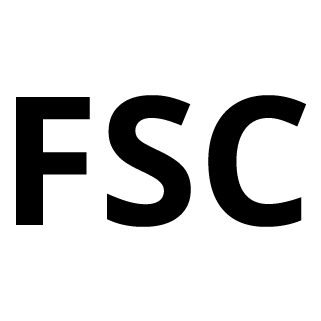
<style>
.page{position:relative;width:321px;height:321px;background:#ffffff}
.page>*{position:absolute;margin:0}
.t1{font:179.3px "NotoSans-Bold";color:#000000}
</style>
<div class="page">
<p class="t1" style="left:16px;top:95px;width:290px;height:132px">FSC</p>
</div>
